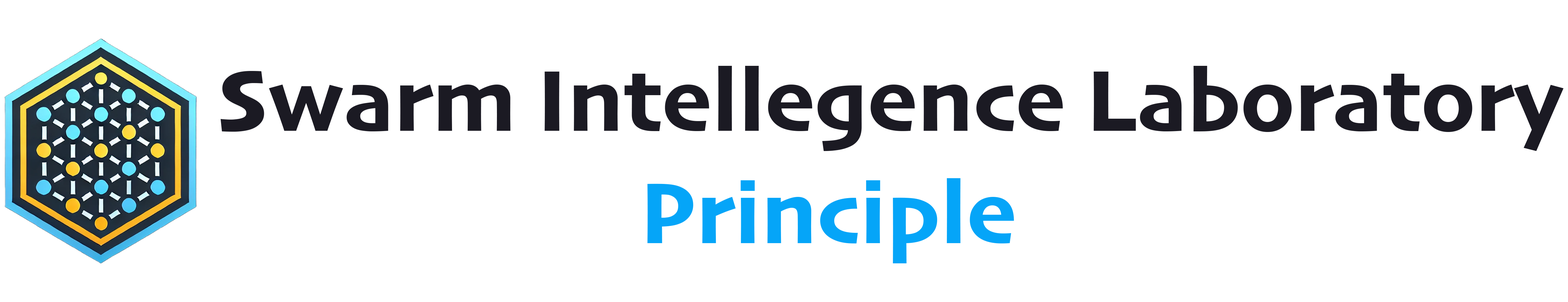
<style>
.page{position:relative;width:1568px;height:302px;background:#ffffff}
.page>*{position:absolute;margin:0}
.t1{font:90.5px "Skia-Bold";color:#1b1a23}
.t2{font:90.5px "Skia-Bold";color:#05a5f8}
</style>
<div class="page">
<p class="t1" style="left:220px;top:66px;width:1343px;height:85px">Swarm Intellegence Laboratory</p>
<p class="t2" style="left:647px;top:178px;width:367px;height:85px">Principle</p>
</div>
